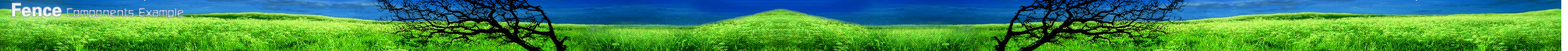
<style>
.page{position:relative;width:1568px;height:51px}
.page>*{position:absolute;margin:0}
.t1{font:18.3px "FZDHTJW--GB1-0";color:#e6f0f3}
.t2{font:11px "FZXSHJW--GB1-0";letter-spacing:0.1em;color:#d0e3ee}
</style>
<div class="page">
<p class="t1" style="left:12px;top:3px;width:50px;height:14px">Fence</p>
<p class="t2" style="left:67px;top:8px;width:116px;height:11px">Components Example</p>
</div>
